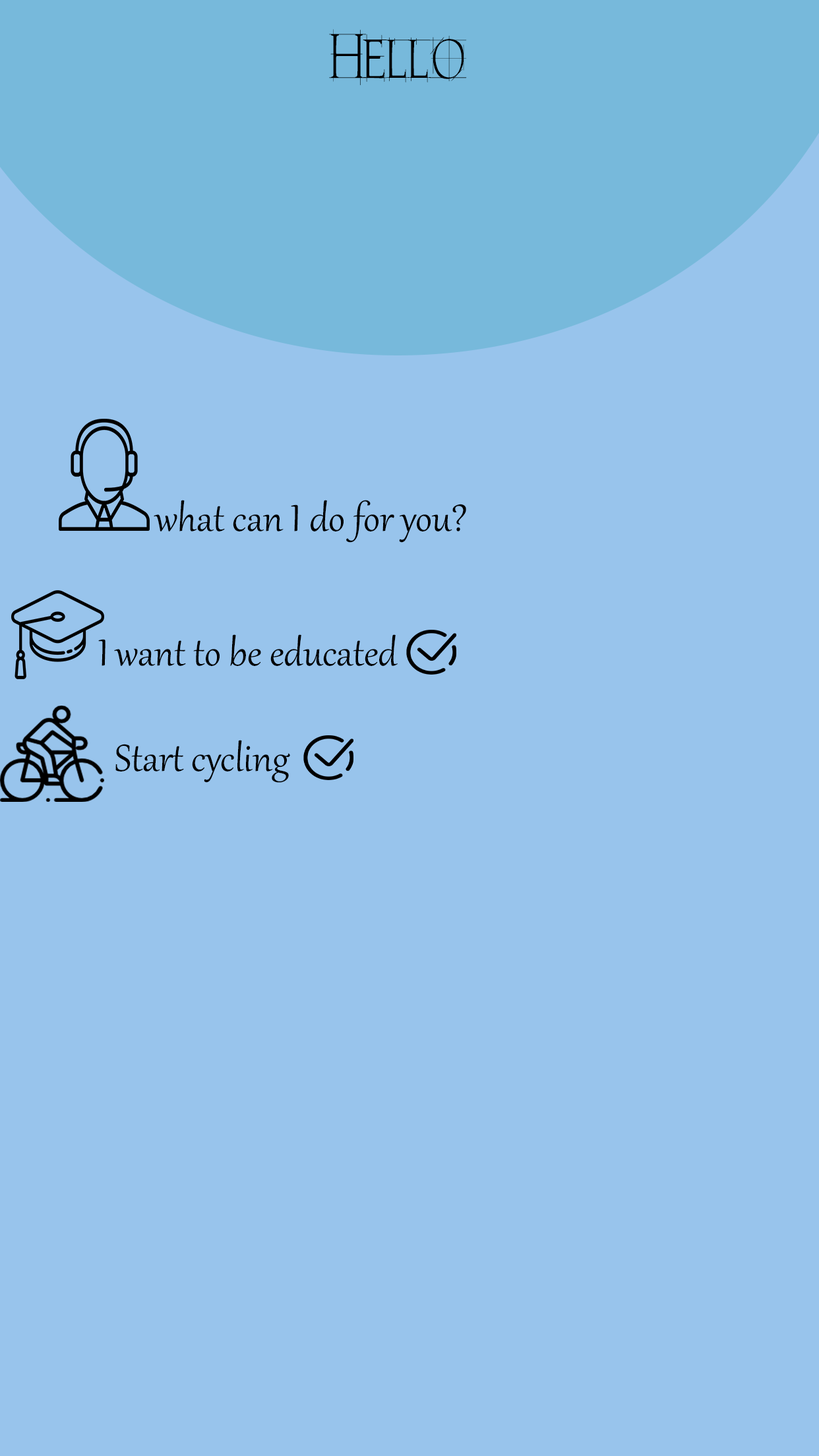
<style>
.page{position:relative;width:819px;height:1456px;background:#98c4ec}
.page>*{position:absolute;margin:0}
.t1{font:60px "Home-Remedy-PS";color:#000000;scale:0.77 1}
.t2{font:46.2px "Gabriola";color:#000000}
</style>
<div class="page">
<p class="t1" style="left:329px;top:29px;width:138px;height:57px">Hello</p>
<p class="t2" style="left:154px;top:500px;width:312px;height:43px">?what can I do for you</p>
<p class="t2" style="left:98px;top:634px;width:300px;height:32px">I want to be educated</p>
<p class="t2" style="left:115px;top:740px;width:175px;height:43px">Start cycling</p>
</div>
